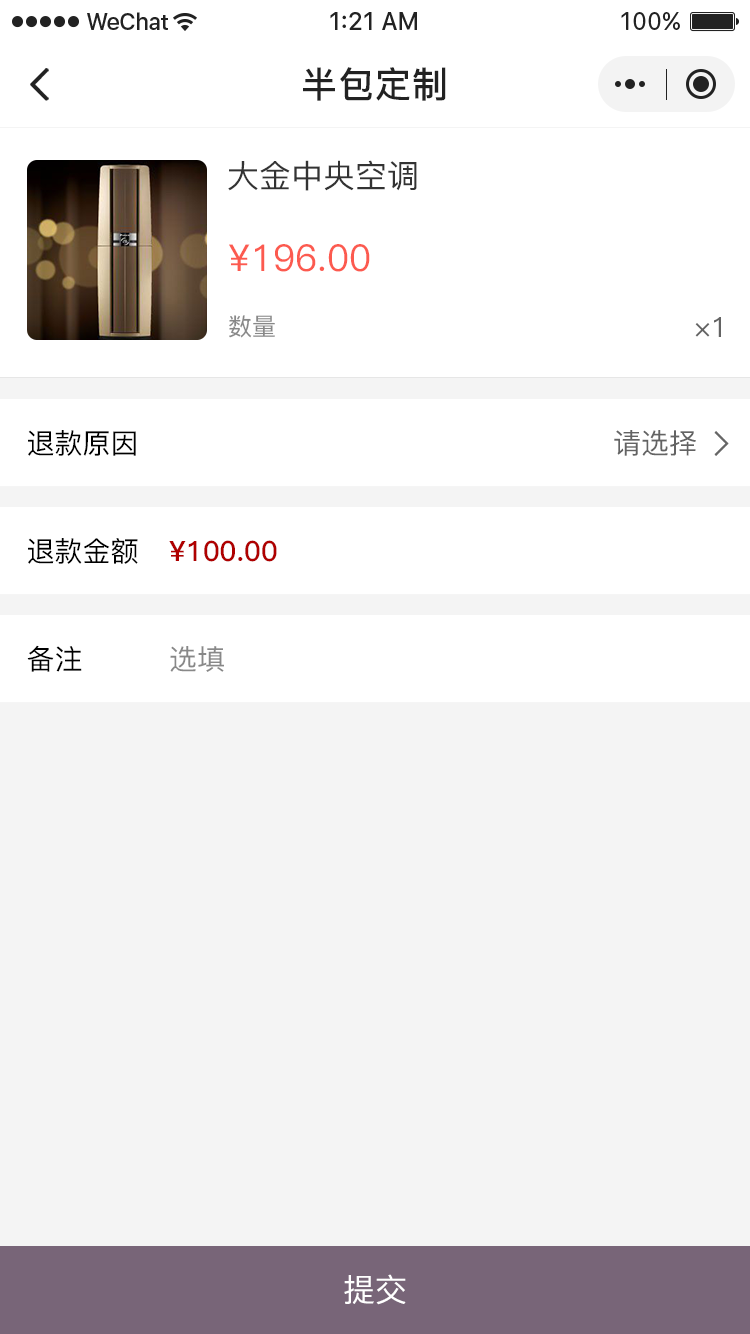
<style>
.page{position:relative;width:750px;height:1334px;background:#f4f4f4}
.page>*{position:absolute;margin:0}
.t1{font:36px "PingFang-SC-Bold";letter-spacing:0.028em;color:#222222}
.t2{font:32px "PingFang-SC-Medium";color:#333333;text-transform:uppercase}
.t3{font:37px "PingFang-SC-Medium";color:#fc5a4f;text-transform:uppercase}
.t4{font:24px "PingFang-SC-Medium";color:#888888;text-transform:uppercase}
.t5{font:28px "PingFang-SC-Medium";color:#636363;text-transform:uppercase}
.t6{font:28px "PingFang-SC-Medium";color:#000000;text-transform:uppercase}
.t7{font:28px "PingFang-SC-Bold";color:#af0000;text-transform:uppercase}
.t8{font:28px "PingFang-SC-Medium";color:#888888;text-transform:uppercase}
.t9{font:32px "PingFang-SC-Medium";color:#ffffff;text-transform:uppercase}
</style>
<div class="page">
<p class="t1" style="left:303px;top:67px;width:143px;height:34px">半包定制</p>
<p class="t2" style="left:228px;top:160px;width:189px;height:31px">大金中央空调</p>
<p class="t3" style="left:229px;top:244px;width:141px;height:28px">¥196.00</p>
<p class="t4" style="left:229px;top:315px;width:46px;height:23px">数量</p>
<p class="t5" style="left:695px;top:317px;width:26px;height:20px">×1</p>
<p class="t6" style="left:28px;top:430px;width:108px;height:26px">退款原因</p>
<p class="t5" style="left:614px;top:430px;width:82px;height:26px">请选择</p>
<p class="t6" style="left:28px;top:538px;width:110px;height:26px">退款金额</p>
<p class="t7" style="left:169px;top:540px;width:108px;height:22px">¥100.00</p>
<p class="t6" style="left:27px;top:645px;width:55px;height:27px">备注</p>
<p class="t8" style="left:170px;top:646px;width:54px;height:26px">选填</p>
<p class="t9" style="left:344px;top:1274px;width:62px;height:31px">提交</p>
</div>
